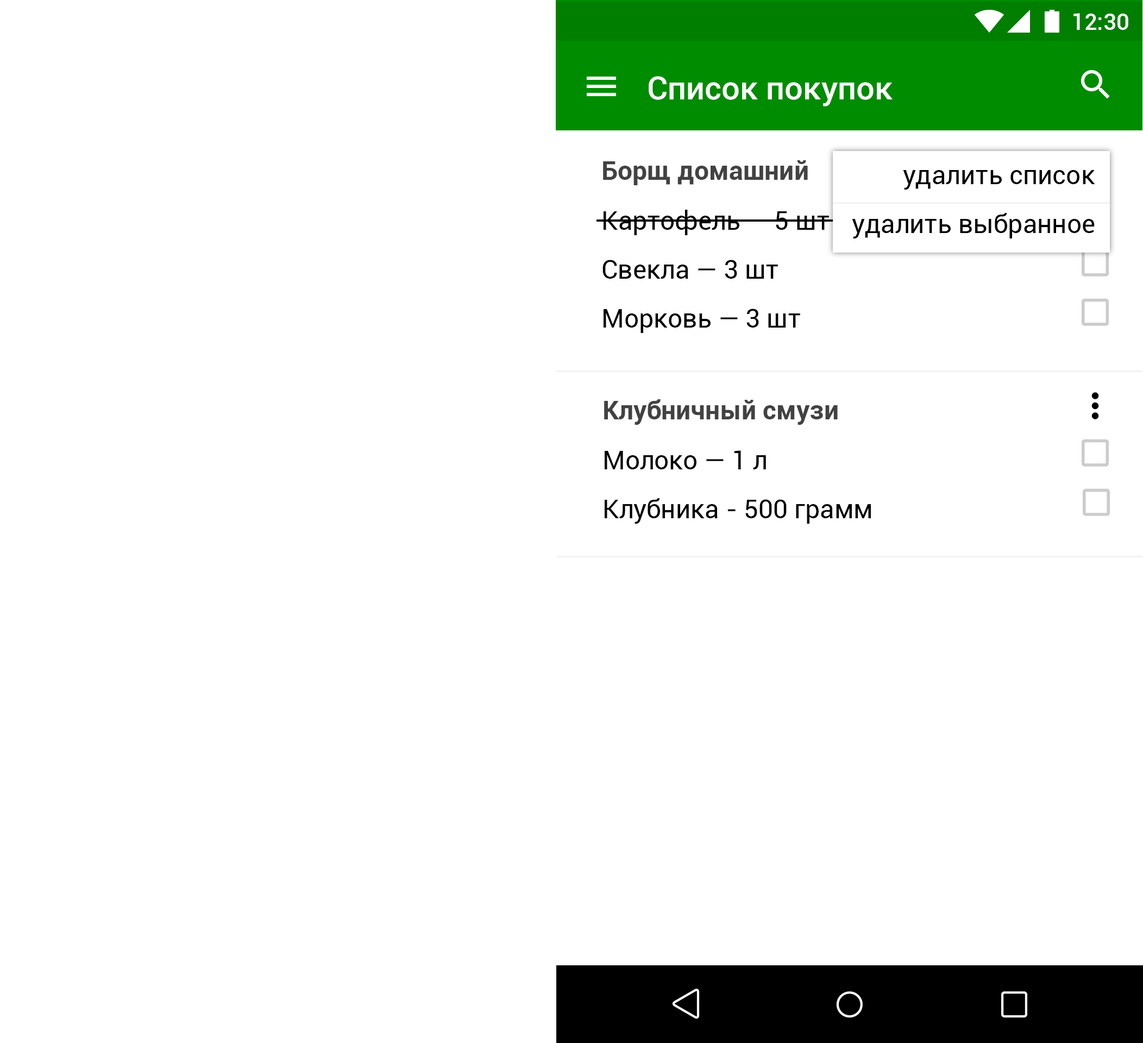
<style>
.page{position:relative;width:1143px;height:1043px;background:#ffffff}
.page>*{position:absolute;margin:0}
.t1{font:22.8px "Roboto-Medium";color:#ffffff}
.t2{font:32.6px "Roboto-Medium";color:#ffffff}
.t3{font:26.1px "Roboto-Bold";color:#424242}
.t4{font:26.1px/48.9px "Roboto-Regular";color:#000000}
</style>
<div class="page">
<p class="t1" style="left:1074px;top:13px;width:54px;height:17px">12:30</p>
<p class="t2" style="left:649px;top:76px;width:244px;height:30px">Список покупок</p>
<p class="t3" style="left:603px;top:160px;width:205px;height:25px">Борщ домашний</p>
<p class="t4" style="left:852px;top:170px;width:243px;height:69px;text-align:right">удалить список<br>удалить выбранное</p>
<p class="t4" style="left:603px;top:210px;width:226px;height:123px">Картофель — 5 шт<br>Свекла — 3 шт<br>Морковь — 3 шт</p>
<p class="t3" style="left:604px;top:399px;width:234px;height:26px">Клубничный смузи</p>
<p class="t4" style="left:605px;top:450px;width:266px;height:74px">Молоко — 1 л<br>Клубника - 500 грамм</p>
</div>
